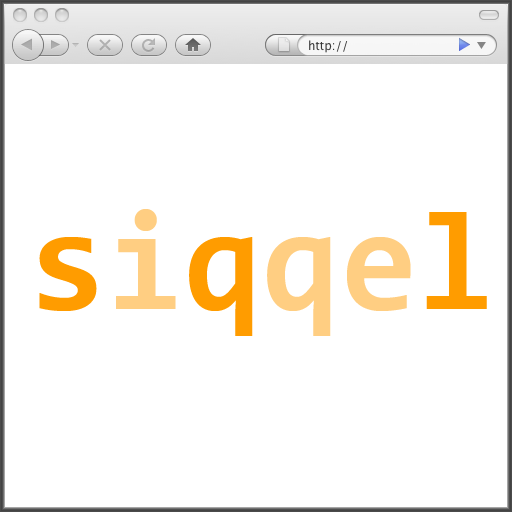
<style>
.page{position:relative;width:512px;height:512px;background:#ffffff}
.page>*{position:absolute;margin:0}
.t1{font:141.4px "Consolas-Bold";color:#ffce82}
.t2{font:141.4px "Consolas-Bold";color:#ff9c00}
</style>
<div class="page">
<p class="t1" style="left:39px;top:209px;width:448px;height:127px"><span class="t2">s</span>i<span class="t2">q</span>qe<span class="t2">l</span></p>
</div>
